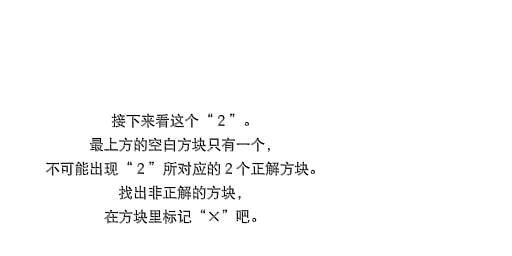
<style>
.page{position:relative;width:512px;height:256px;background:#ffffff}
.page>*{position:absolute;margin:0}
.t1{font:14.7px/24px "DFPHeiW5-GB"}
</style>
<div class="page">
<p class="t1" style="left:45px;top:113px;width:270px;height:111px;text-align:center">接下来看这个“２”。<br>最上方的空白方块只有一个，<br>不可能出现“２”所对应的２个正解方块。<br>找出非正解的方块，<br>在方块里标记“×”吧。</p>
</div>
